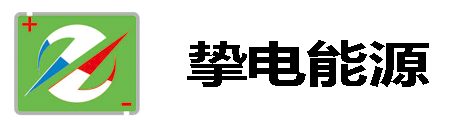
<style>
.page{position:relative;width:450px;height:130px;background:#ffffff}
.page>*{position:absolute;margin:0}
.t1{font:48px "MicrosoftYaHei-Bold";letter-spacing:0.022em;color:#000000;scale:1.3 1}
</style>
<div class="page">
<p class="t1" style="left:187px;top:40px;width:242px;height:47px">挚电能源</p>
</div>
